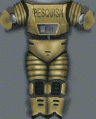
<style>
.page{position:relative;width:96px;height:119px;background:#676f6f}
.page>*{position:absolute;margin:0}
.t1{font:11.7px "ArialMT";color:#584f2e;scale:0.49 1}
</style>
<div class="page">
<p class="t1" style="left:33px;top:8px;width:30px;height:10px">PESQUISA</p>
</div>
